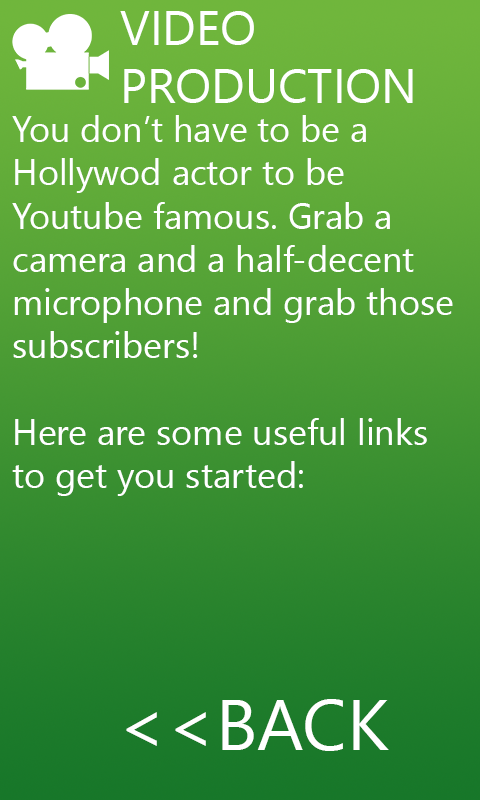
<style>
.page{position:relative;width:480px;height:800px}
.page>*{position:absolute;margin:0}
.t1{font:48px "SegoeUIHistoric";color:#ffffff}
.t2{font:36px "SegoeUIHistoric";color:#ffffff}
.t3{font:72px "SegoeUIHistoric";color:#ffffff}
</style>
<div class="page">
<p class="t1" style="left:120px;top:11px;width:293px;height:92px">VIDEO<br>PRODUCTION</p>
<p class="t2" style="left:12px;top:115px;width:441px;height:381px">You don’t have to be a<br>Hollywod actor to be<br>Youtube famous. Grab a<br>camera and a half-decent<br>microphone and grab those<br>subscribers!<br><br>Here are some useful links<br>to get you started:</p>
<p class="t3" style="left:126px;top:699px;width:263px;height:52px">&lt;&lt;BACK</p>
</div>
